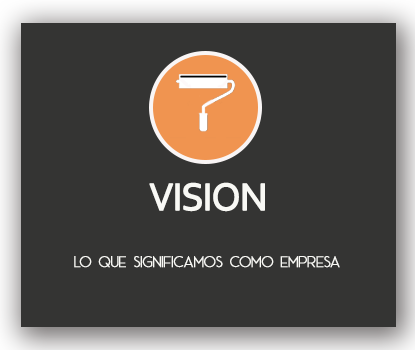
<style>
.page{position:relative;width:415px;height:350px;background:#343433}
.page>*{position:absolute;margin:0}
.t1{font:40px "Corbel";letter-spacing:-0.05em;color:#f9f9f5;font-weight:bold}
.t2{font:16px "AceSansDemo";letter-spacing:-0.05em;color:#f9f9f5;font-weight:bold}
</style>
<div class="page">
<p class="t1" style="left:149px;top:182px;width:116px;height:30px">VISION</p>
<p class="t2" style="left:74px;top:256px;width:266px;height:12px">LO QUE SIGNIFICAMOS COMO EMPRESA</p>
</div>
